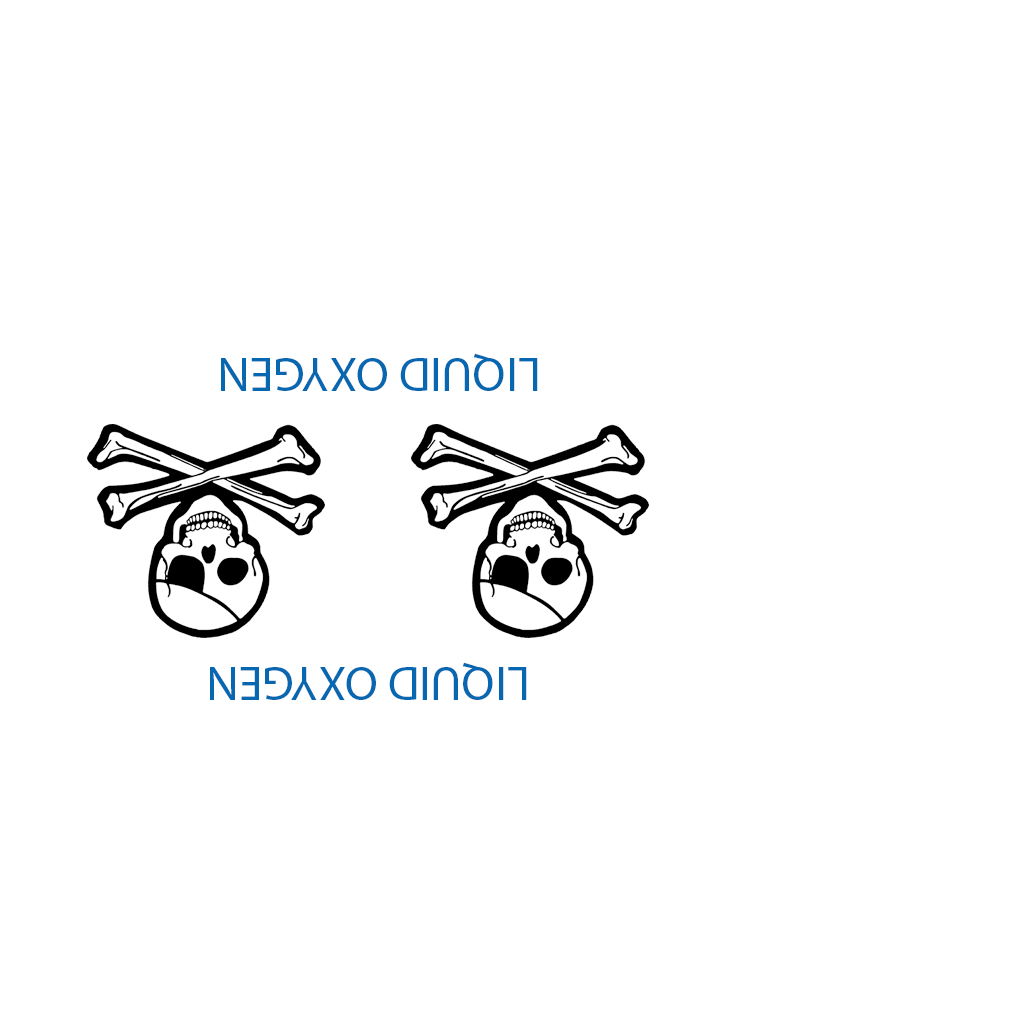
<style>
.page{position:relative;width:1024px;height:1024px;background:#ffffff}
.page>*{position:absolute;margin:0}
.t1{font:48px "MyriadPro-Regular";color:#0767b0}
</style>
<div class="page">
<p class="t1" style="left:221px;top:353px;width:317px;height:38px;rotate:180deg">LIQUID OXYGEN</p>
<p class="t1" style="left:210px;top:662px;width:317px;height:38px;rotate:180deg">LIQUID OXYGEN</p>
</div>
